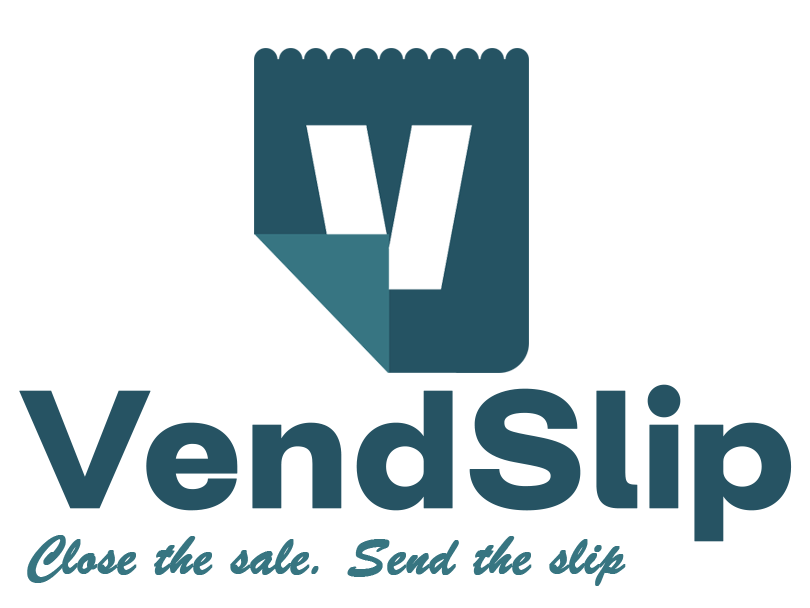
<style>
.page{position:relative;width:810px;height:608px;background:#ffffff}
.page>*{position:absolute;margin:0}
.t1{font:166.7px "FONTSPRINGDEMO-LupioBold";color:#265363;font-weight:bold}
.t2{font:58.1px "BrushScriptMT";color:#377581;font-weight:bold}
</style>
<div class="page">
<p class="t1" style="left:19px;top:384px;width:773px;height:158px">VendSlip</p>
<p class="t2" style="left:27px;top:535px;width:599px;height:51px">Close the sale. Send the slip</p>
</div>
